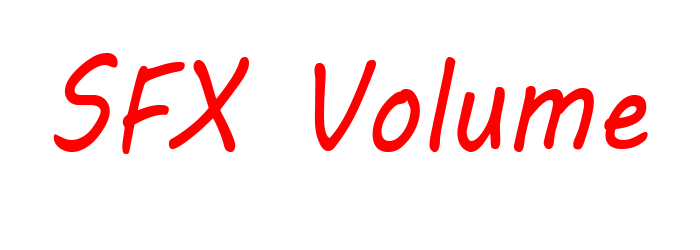
<style>
.page{position:relative;width:700px;height:250px;background:#ffffff}
.page>*{position:absolute;margin:0}
.t1{font:125px "MVBoli";color:#ff0000;scale:0.84 1}
</style>
<div class="page">
<p class="t1" style="left:53px;top:53px;width:595px;height:101px">SFX Volume</p>
</div>
